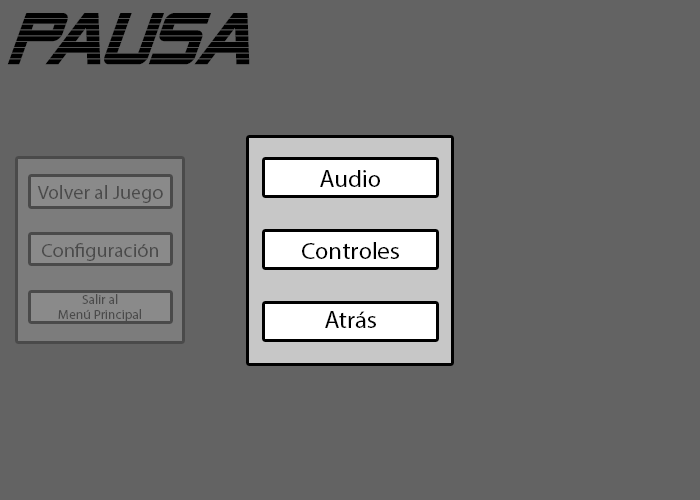
<style>
.page{position:relative;width:700px;height:500px;background:#636363}
.page>*{position:absolute;margin:0}
.t1{font:72.4px "AlienEncountersBoldItalic";color:#000000}
.t2{font:24px "MyriadPro-Regular";color:#000000}
.t3{font:19.4px "MyriadPro-Regular";color:#4a4a4a}
.t4{font:19.3px "MyriadPro-Regular";color:#4a4a4a;scale:1.04 1}
.t5{font:23.8px "MyriadPro-Regular";color:#000000;scale:1.04 1}
.t6{font:12.9px "MyriadPro-Regular";color:#4a4a4a;scale:1.04 1}
</style>
<div class="page">
<p class="t1" style="left:7px;top:13px;width:243px;height:52px">PAUSA</p>
<p class="t2" style="left:320px;top:170px;width:60px;height:17px">Audio</p>
<p class="t3" style="left:37px;top:185px;width:126px;height:18px">Volver al Juego</p>
<p class="t4" style="left:42px;top:243px;width:116px;height:18px">Configuración</p>
<p class="t5" style="left:302px;top:242px;width:97px;height:17px">Controles</p>
<p class="t6" style="left:58px;top:294px;width:83px;height:28px;text-align:center">Salir al<br>Menú Principal</p>
<p class="t2" style="left:325px;top:311px;width:51px;height:17px">Atrás</p>
</div>
